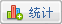
<style>
.page{position:relative;width:62px;height:24px;background:#f4f4f4}
.page>*{position:absolute;margin:0}
.t1{font:12px "SimSun";letter-spacing:0.075em;color:#3967a3}
</style>
<div class="page">
<p class="t1" style="left:29px;top:7px;width:24px;height:11px">统计</p>
</div>
